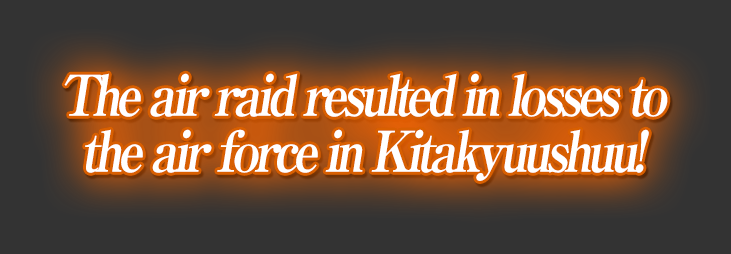
<style>
.page{position:relative;width:731px;height:254px;background:#333333}
.page>*{position:absolute;margin:0}
.t1{font:56px/56px "RyuminPro-ExBold";letter-spacing:-0.1em;color:#ffffff;font-style:italic;scale:0.9 1}
</style>
<div class="page">
<p class="t1" style="left:64px;top:73px;width:604px;height:108px;text-align:center">The air raid resulted in losses to<br>the air force in Kitakyuushuu!</p>
</div>
